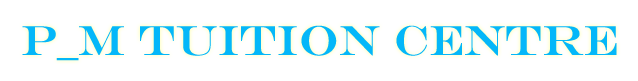
<style>
.page{position:relative;width:638px;height:81px;background:#ffffff}
.page>*{position:absolute;margin:0}
.t1{font:42px "EngraversMT";color:#04b7f9}
</style>
<div class="page">
<p class="t1" style="left:22px;top:25px;width:595px;height:36px">P_M TUITION CENTRE</p>
</div>
